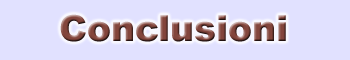
<style>
.page{position:relative;width:350px;height:60px;background:#e1e1ff}
.page>*{position:absolute;margin:0}
.t1{font:36px "Arial-Black"}
</style>
<div class="page">
<p class="t1" style="left:60px;top:14px;width:226px;height:28px">Conclusioni</p>
</div>
